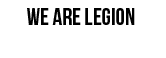
<style>
.page{position:relative;width:166px;height:58px;background:#ffffff}
.page>*{position:absolute;margin:0}
.t1{font:24px "BebasNeue";color:#000000}
</style>
<div class="page">
<p class="t1" style="left:27px;top:8px;width:108px;height:17px">We Are Legion</p>
</div>
